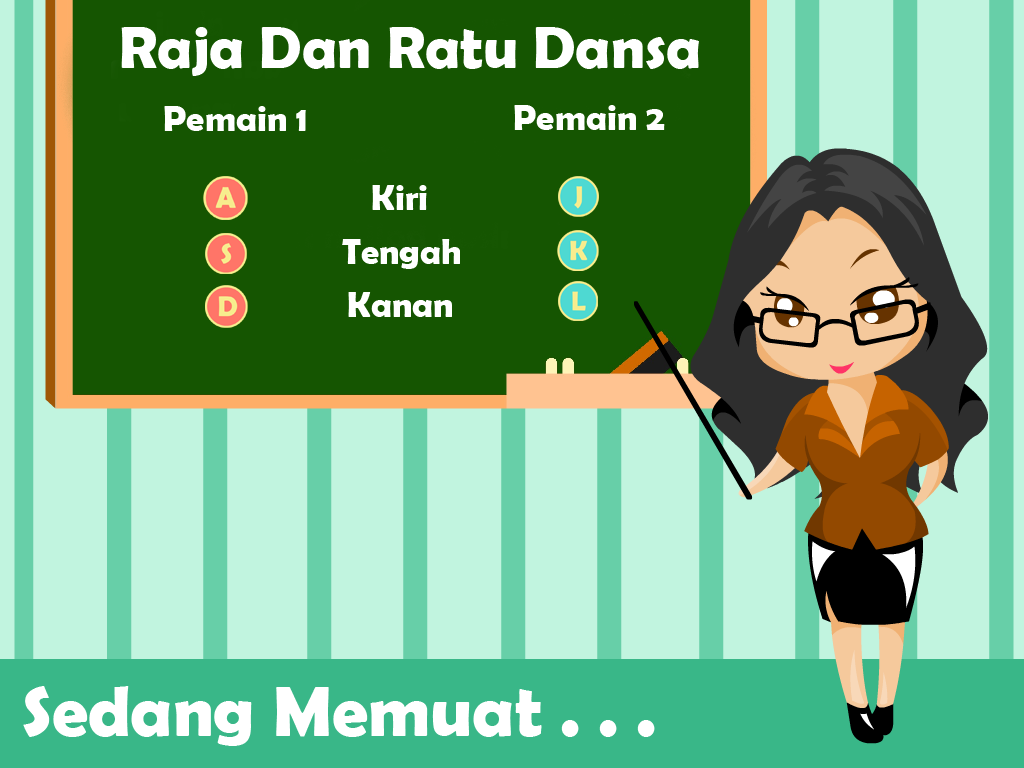
<style>
.page{position:relative;width:1024px;height:768px;background:#c1f4df}
.page>*{position:absolute;margin:0}
.t1{font:60px "BerlinSansFBDemi-Bold";color:#ffffff}
.t2{font:36px "BerlinSansFBDemi-Bold";color:#ffffff}
.t3{font:72px "BerlinSansFBDemi-Bold";color:#ffffff}
</style>
<div class="page">
<p class="t1" style="left:121px;top:27px;width:578px;height:49px">Raja Dan Ratu Dansa</p>
<p class="t2" style="left:164px;top:106px;width:142px;height:25px">Pemain 1</p>
<p class="t2" style="left:514px;top:105px;width:151px;height:25px">Pemain 2</p>
<p class="t2" style="left:372px;top:185px;width:55px;height:25px">Kiri</p>
<p class="t2" style="left:342px;top:239px;width:118px;height:30px">Tengah</p>
<p class="t2" style="left:348px;top:292px;width:104px;height:25px">Kanan</p>
<p class="t3" style="left:23px;top:686px;width:632px;height:60px">Sedang Memuat . . .</p>
</div>
